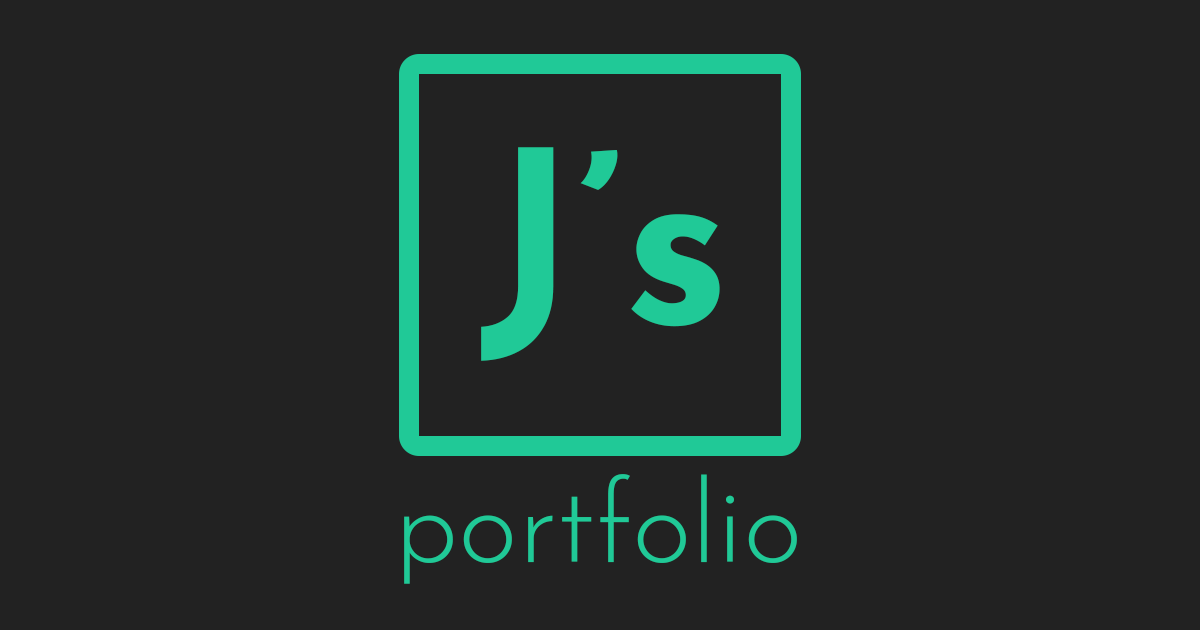
<style>
.page{position:relative;width:1200px;height:630px;background:#222222}
.page>*{position:absolute;margin:0}
.t1{font:240px "JosefinSans-Bold";color:#20c997}
.t2{font:115px "JosefinSans-Light";color:#20c997}
</style>
<div class="page">
<p class="t1" style="left:481px;top:147px;width:239px;height:214px">J’s</p>
<p class="t2" style="left:404px;top:474px;width:393px;height:110px">portfolio</p>
</div>
